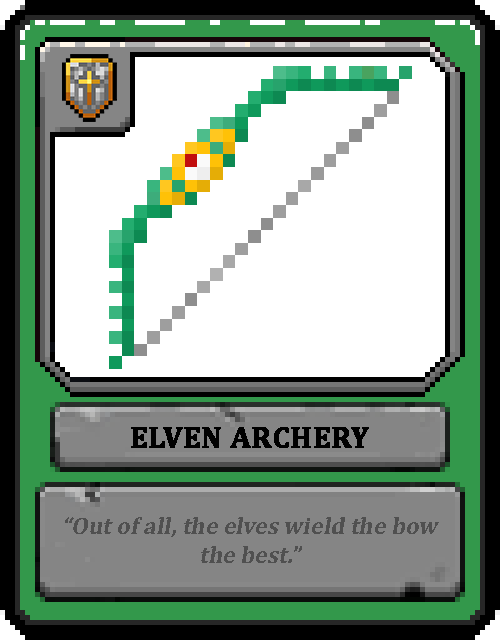
<style>
.page{position:relative;width:500px;height:640px;background:#ffffff}
.page>*{position:absolute;margin:0}
.t1{font:30px "Cambria-Bold";color:#000000;text-transform:uppercase;font-weight:bold}
.t2{font:24px "Cambria-Bold";color:#505050;font-style:italic}
</style>
<div class="page">
<p class="t1" style="left:131px;top:427px;width:238px;height:21px">Elven Archery</p>
<p class="t2" style="left:65px;top:517px;width:374px;height:46px;text-align:center">“Out of all, the elves wield the bow the best.”</p>
</div>
